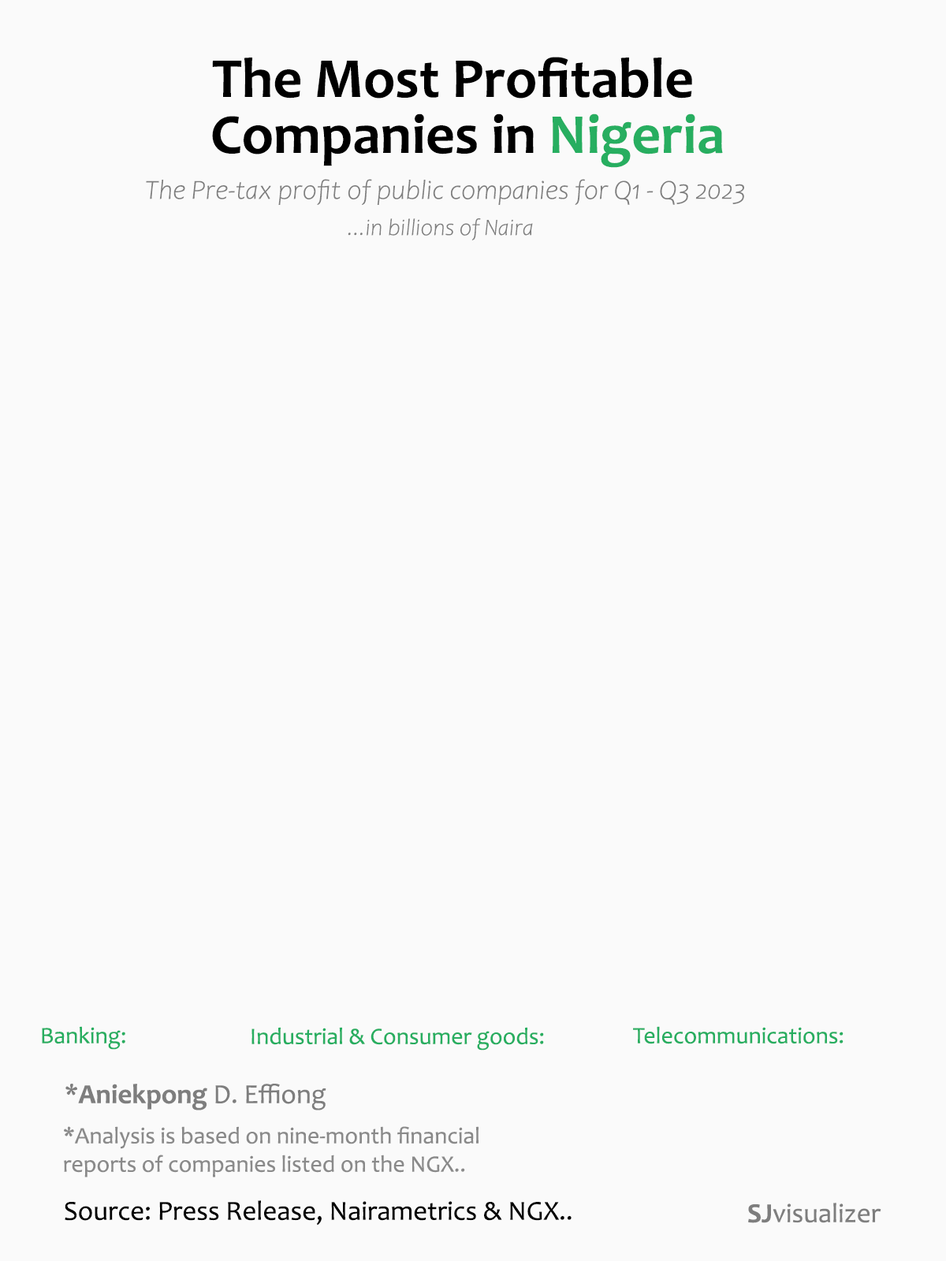
<style>
.page{position:relative;width:946px;height:1261px;background:#fafafa}
.page>*{position:absolute;margin:0}
.t1{font:56.7px "Candara-Bold";color:#000000}
.t2{font:56.7px "Candara-Bold";color:#27ae60}
.t3{font:27.6px "Candara-LightItalic";color:#7e7e7e}
.t4{font:23.6px "Candara-LightItalic";color:#7e7e7e}
.t5{font:23.6px "Candara";color:#27ae60}
.t6{font:27.6px "Candara";color:#7e7e7e}
.t7{font:27.6px "Candara-Bold";color:#7e7e7e}
.t8{font:23.6px "Candara";color:#8a8a8a}
.t9{font:27.6px "Candara";color:#000000}
</style>
<div class="page">
<p class="t1" style="left:212px;top:57px;width:480px;height:42px">The Most Profitable</p>
<p class="t1" style="left:212px;top:113px;width:511px;height:55px">Companies in <span class="t2">Nigeria</span></p>
<p class="t3" style="left:146px;top:179px;width:598px;height:26px">The Pre-tax profit of public companies for Q1 - Q3 2023</p>
<p class="t4" style="left:348px;top:218px;width:185px;height:22px">...in billions of Naira</p>
<p class="t5" style="left:42px;top:1026px;width:83px;height:24px">Banking:</p>
<p class="t5" style="left:251px;top:1027px;width:293px;height:24px">Industrial &amp; Consumer goods:</p>
<p class="t5" style="left:633px;top:1026px;width:210px;height:18px">Telecommunications:</p>
<p class="t6" style="left:65px;top:1084px;width:261px;height:26px">*<span class="t7">Aniekpong</span> D. Effiong</p>
<p class="t8" style="left:64px;top:1126px;width:414px;height:51px">*Analysis is based on nine-month financial<br>reports of companies listed on the NGX..</p>
<p class="t9" style="left:65px;top:1200px;width:506px;height:25px">Source: Press Release, Nairametrics &amp; NGX..</p>
<p class="t6" style="left:748px;top:1203px;width:133px;height:20px"><span class="t7">SJ</span>visualizer</p>
</div>
